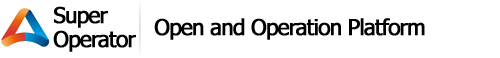
<style>
.page{position:relative;width:500px;height:58px;background:#ffffff}
.page>*{position:absolute;margin:0}
.t1{font:22px/24px "Tahoma";letter-spacing:-0.05em;color:#000000;font-weight:bold}
.t2{font:22px "Tahoma";letter-spacing:-0.05em;color:#000000;font-weight:bold}
</style>
<div class="page">
<p class="t1" style="left:53px;top:6px;width:83px;height:46px">Super <br>Operator</p>
<p class="t2" style="left:154px;top:18px;width:271px;height:22px">Open and Operation Platform</p>
</div>
